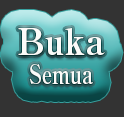
<style>
.page{position:relative;width:124px;height:117px;background:#333333}
.page>*{position:absolute;margin:0}
.t1{font:27px/37px "RyuminPro-ExBold";color:#fbfbf9;scale:0.77 1}
.t2{font:36px/37px "RyuminPro-ExBold";color:#fbfbf9}
</style>
<div class="page">
<p class="t1" style="left:18px;top:28px;width:87px;height:56px;text-align:center"><span class="t2">Buka<br></span>Semua</p>
</div>
